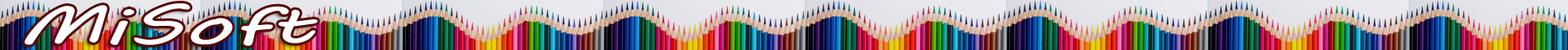
<style>
.page{position:relative;width:1568px;height:50px}
.page>*{position:absolute;margin:0}
.t1{font:51.5px "MVBoli";color:#ffffff;scale:1.78 1}
</style>
<div class="page">
<p class="t1" style="left:24px;top:3px;width:294px;height:42px">MiSoft</p>
</div>
